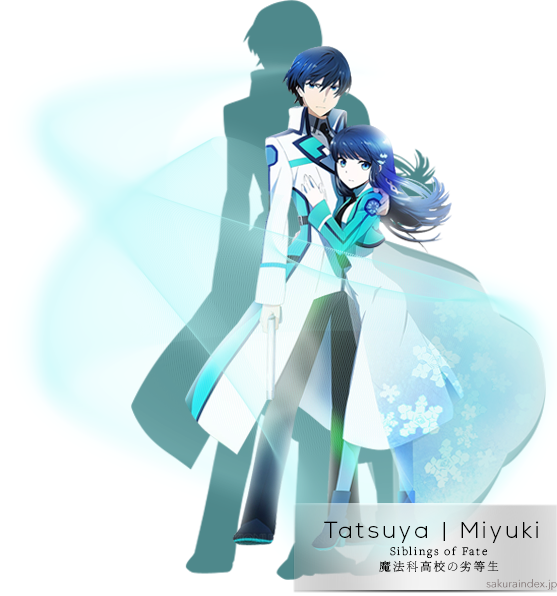
<style>
.page{position:relative;width:557px;height:596px;background:#ffffff}
.page>*{position:absolute;margin:0}
.t1{font:23px "NexaLight";letter-spacing:0.138em;color:#000000}
.t2{font:12px "FreightTextProLight-Regular";letter-spacing:0.138em;color:#000000}
.t3{font:12px "YuMincho-Light";letter-spacing:0.138em;color:#000000}
.t4{font:10.8px "AvenirNextLTPro-Regular"}
</style>
<div class="page">
<p class="t1" style="left:324px;top:521px;width:215px;height:22px">Tatsuya | Miyuki</p>
<p class="t2" style="left:390px;top:546px;width:97px;height:13px">Siblings of Fate</p>
<p class="t3" style="left:379px;top:560px;width:120px;height:12px">魔法科高校の劣等生</p>
<p class="t4" style="left:486px;top:579px;width:71px;height:11px">sakuraindex.jp</p>
</div>
